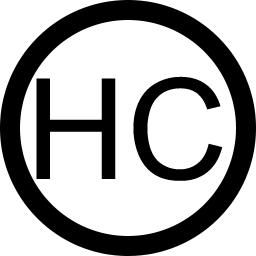
<style>
.page{position:relative;width:256px;height:256px;background:#ffffff}
.page>*{position:absolute;margin:0}
.t1{font:140px "ArialMT";color:#000000}
</style>
<div class="page">
<p class="t1" style="left:36px;top:76px;width:187px;height:105px">HC</p>
</div>
